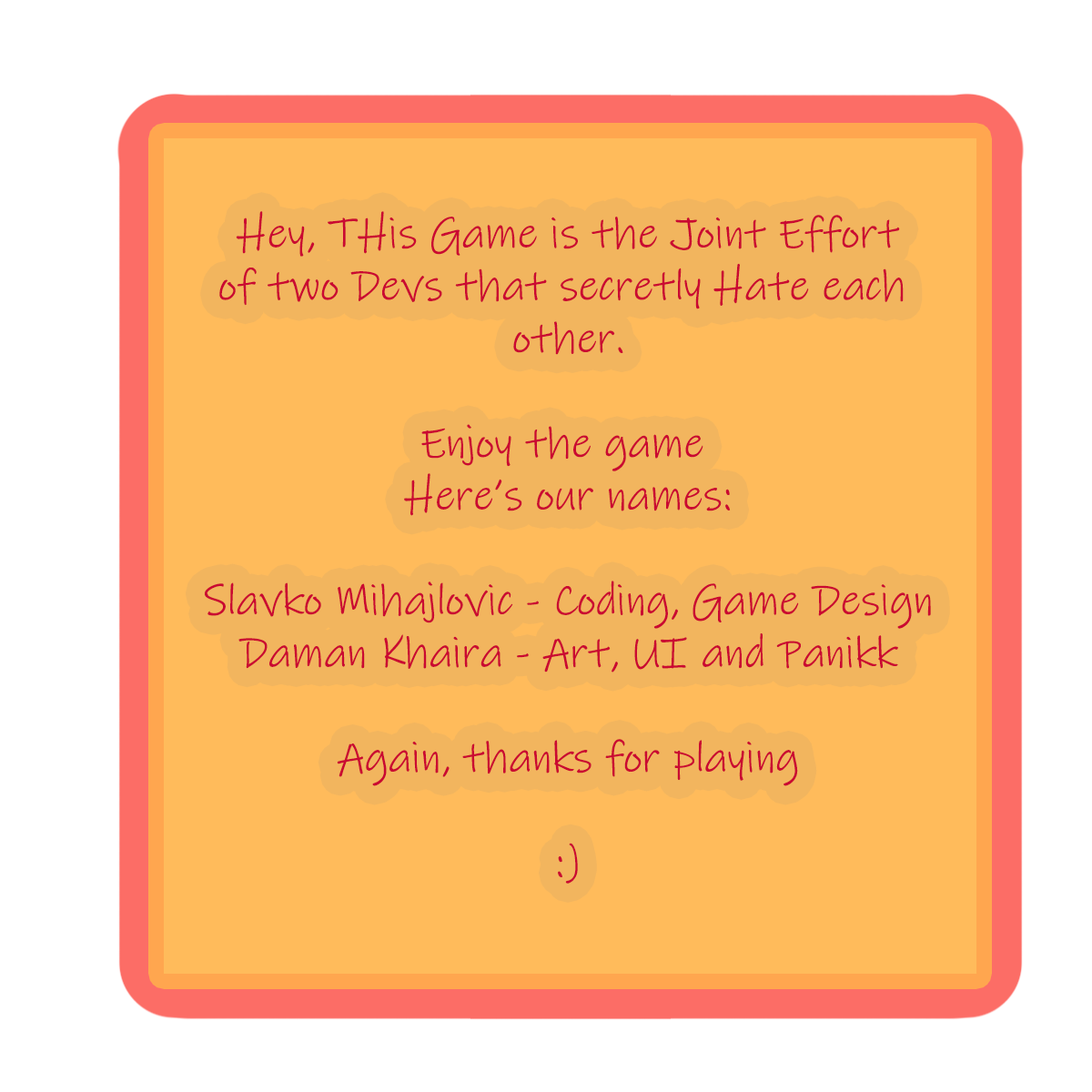
<style>
.page{position:relative;width:1092px;height:1092px;background:#ffbb5b}
.page>*{position:absolute;margin:0}
.t1{font:43.7px "InkFree";color:#ca0932}
</style>
<div class="page">
<p class="t1" style="left:205px;top:211px;width:726px;height:673px;text-align:center">Hey, THis Game is the Joint Effort<br>of two Devs that secretly Hate each <br>other.<br><br>Enjoy the game <br>Here’s our names:<br><br>Slavko Mihajlovic - Coding, Game Design<br>Daman Khaira - Art, UI and Panikk<br><br>Again, thanks for playing<br><br>:)</p>
</div>
